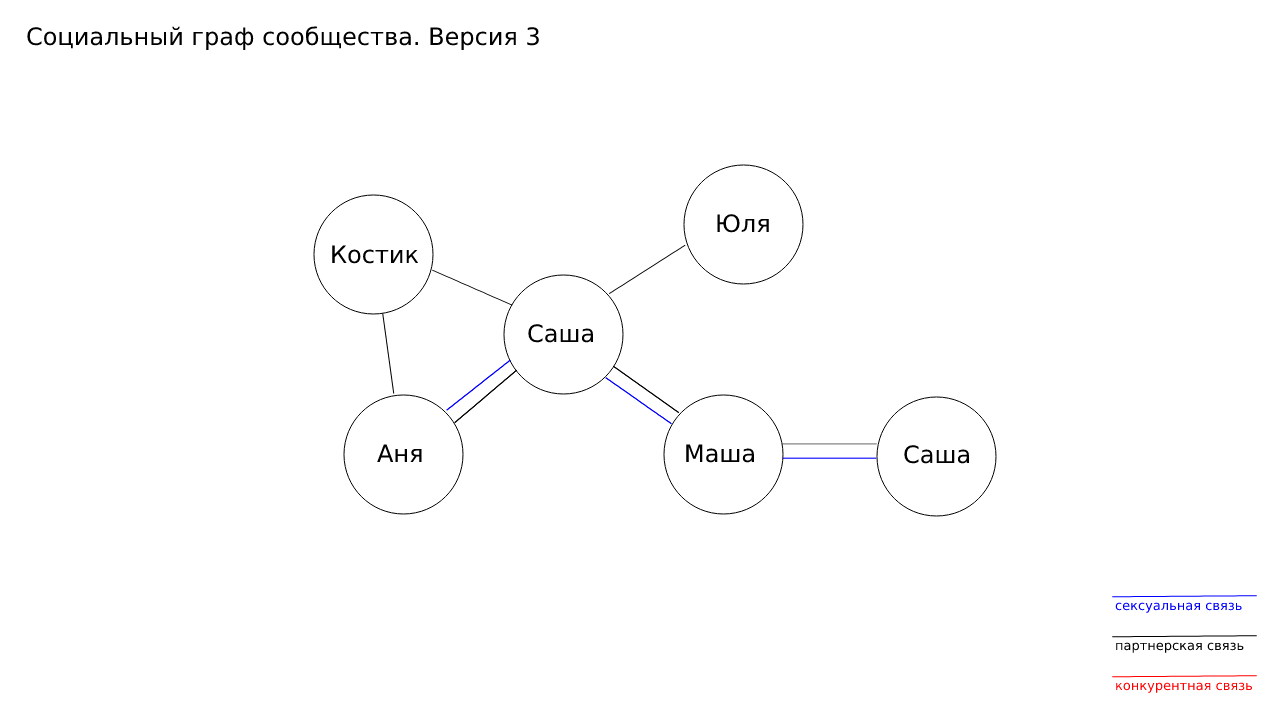
<style>
.page{position:relative;width:1280px;height:720px;background:#ffffff}
.page>*{position:absolute;margin:0}
.t1{font:24px "DejaVuSans";color:#000000}
.t2{font:13px "DejaVuSans";color:#0000ff}
.t3{font:13px "DejaVuSans";color:#000000}
.t4{font:13px "DejaVuSans";color:#ff0000}
</style>
<div class="page">
<p class="t1" style="left:27px;top:26px;width:512px;height:24px">Социальный граф сообщества. Версия 3</p>
<p class="t1" style="left:717px;top:214px;width:52px;height:19px">Юля</p>
<p class="t1" style="left:332px;top:245px;width:87px;height:19px">Костик</p>
<p class="t1" style="left:528px;top:324px;width:65px;height:19px">Саша</p>
<p class="t1" style="left:377px;top:444px;width:45px;height:18px">Аня</p>
<p class="t1" style="left:686px;top:444px;width:68px;height:19px">Маша</p>
<p class="t1" style="left:904px;top:445px;width:65px;height:19px">Саша</p>
<p class="t2" style="left:1115px;top:602px;width:127px;height:11px">сексуальная связь</p>
<p class="t3" style="left:1116px;top:642px;width:128px;height:11px">партнерская связь</p>
<p class="t4" style="left:1116px;top:682px;width:137px;height:11px">конкурентная связь</p>
</div>
